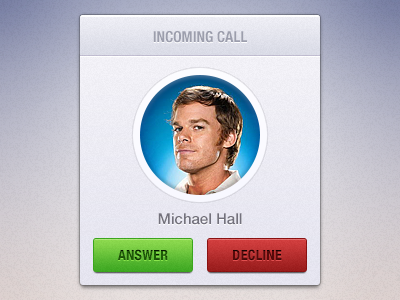
<style>
.page{position:relative;width:400px;height:300px}
.page>*{position:absolute;margin:0}
.t1{font:15px "HelveticaNeue-CondensedBold";color:#9b9dac;text-transform:uppercase}
.t2{font:15px "HelveticaNeue-Medium";color:#73717c}
.t3{font:14px "HelveticaNeue-CondensedBold";letter-spacing:0.025em;color:#1d5c07;text-transform:uppercase}
.t4{font:14px "HelveticaNeue-CondensedBold";letter-spacing:0.025em;color:#570a0a;text-transform:uppercase}
</style>
<div class="page">
<p class="t1" style="left:153px;top:31px;width:94px;height:12px">Incoming call</p>
<p class="t2" style="left:158px;top:213px;width:84px;height:12px">Michael Hall</p>
<p class="t3" style="left:118px;top:249px;width:50px;height:12px">Answer</p>
<p class="t4" style="left:233px;top:249px;width:49px;height:12px">Decline</p>
</div>
